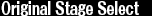
<style>
.page{position:relative;width:152px;height:16px;background:#000000}
.page>*{position:absolute;margin:0}
.t1{font:17.2px "FolkPro-Heavy";color:#ffffff;scale:0.72 1}
</style>
<div class="page">
<p class="t1" style="left:1px;top:1px;width:138px;height:17px">Original Stage Select</p>
<p class="t1" style="left:1px;top:0px;width:138px;height:17px">Original Stage Select</p>
</div>
